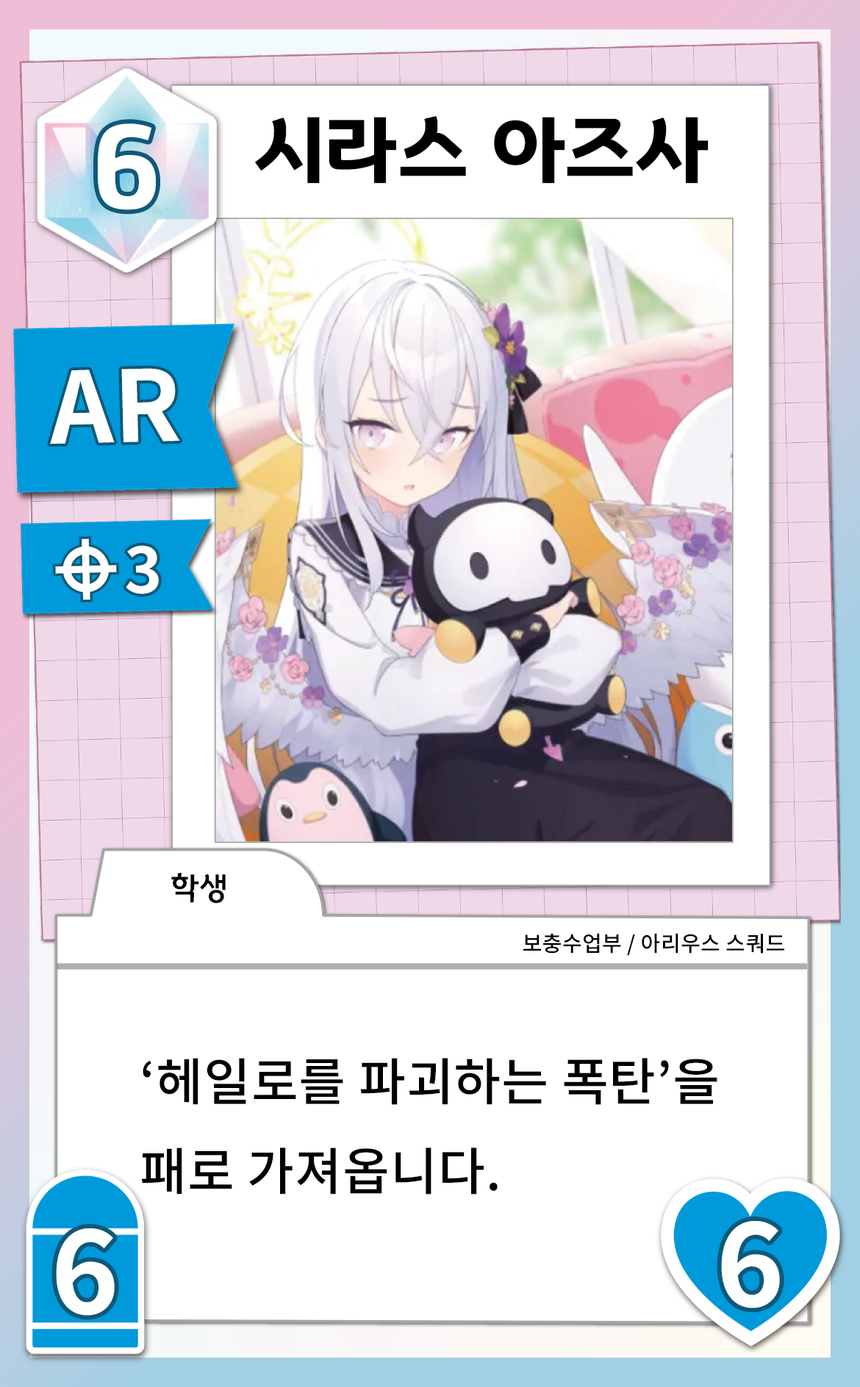
<style>
.page{position:relative;width:860px;height:1387px;background:#ffffff}
.page>*{position:absolute;margin:0}
.t1{font:115.9px "GyeonggiTitleB";letter-spacing:0.01em;color:#feffff}
.t2{font:81.5px "GyeonggiTitleB";letter-spacing:0.01em;color:#000000}
.t3{font:98.2px "NotoSansCJKkr-Bold";letter-spacing:0.01em;color:#feffff}
.t4{font:64.3px "NotoSansCJKkr-Bold";letter-spacing:0.01em;color:#feffff}
.t5{font:32.1px "GyeonggiTitleM";letter-spacing:0.01em;color:#000000}
.t6{font:21.5px "NotoSansCJKkr-Medium";letter-spacing:0.01em;color:#000000}
.t7{font:51.2px "NotoSansCJKkr-Medium";letter-spacing:0.01em;color:#000000}
.t8{font:115.9px "NotoSansCJKkr-Bold";letter-spacing:0.01em;color:#feffff}
</style>
<div class="page">
<p class="t1" style="left:98px;top:123px;width:58px;height:87px">6</p>
<p class="t2" style="left:255px;top:116px;width:453px;height:68px">시라스 아즈사</p>
<p class="t3" style="left:50px;top:368px;width:130px;height:77px;rotate:-1deg">AR</p>
<p class="t4" style="left:126px;top:545px;width:33px;height:49px">3</p>
<p class="t5" style="left:171px;top:872px;width:55px;height:32px">학생</p>
<p class="t6" style="left:523px;top:933px;width:261px;height:23px">보충수업부 / 아리우스 스쿼드</p>
<p class="t7" style="left:141px;top:1058px;width:576px;height:137px">‘헤일로를 파괴하는 폭탄’을<br>패로 가져옵니다.</p>
<p class="t8" style="left:56px;top:1228px;width:59px;height:88px">6</p>
<p class="t8" style="left:721px;top:1221px;width:59px;height:88px">6</p>
</div>
